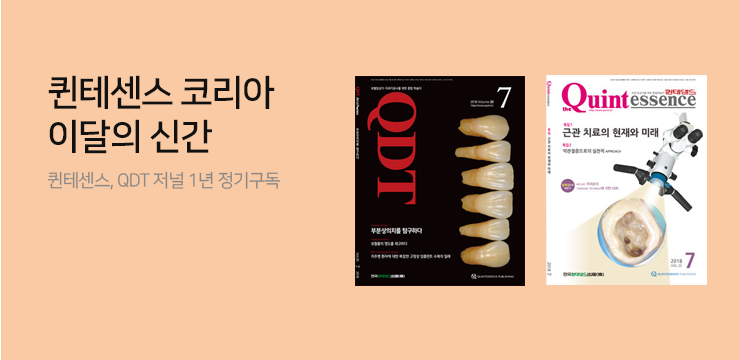
<style>
.page{position:relative;width:740px;height:360px;background:#f9caa3}
.page>*{position:absolute;margin:0}
.t1{font:36px/44px "NanumSquareB";letter-spacing:-0.04em;color:#111111}
.t2{font:18px "NanumSquareR";letter-spacing:-0.04em;color:#888888}
</style>
<div class="page">
<p class="t1" style="left:48px;top:75px;width:227px;height:79px">퀸테센스 코리아<br>이달의 신간</p>
<p class="t2" style="left:47px;top:171px;width:234px;height:19px">퀸테센스, QDT 저널 1년 정기구독</p>
</div>
